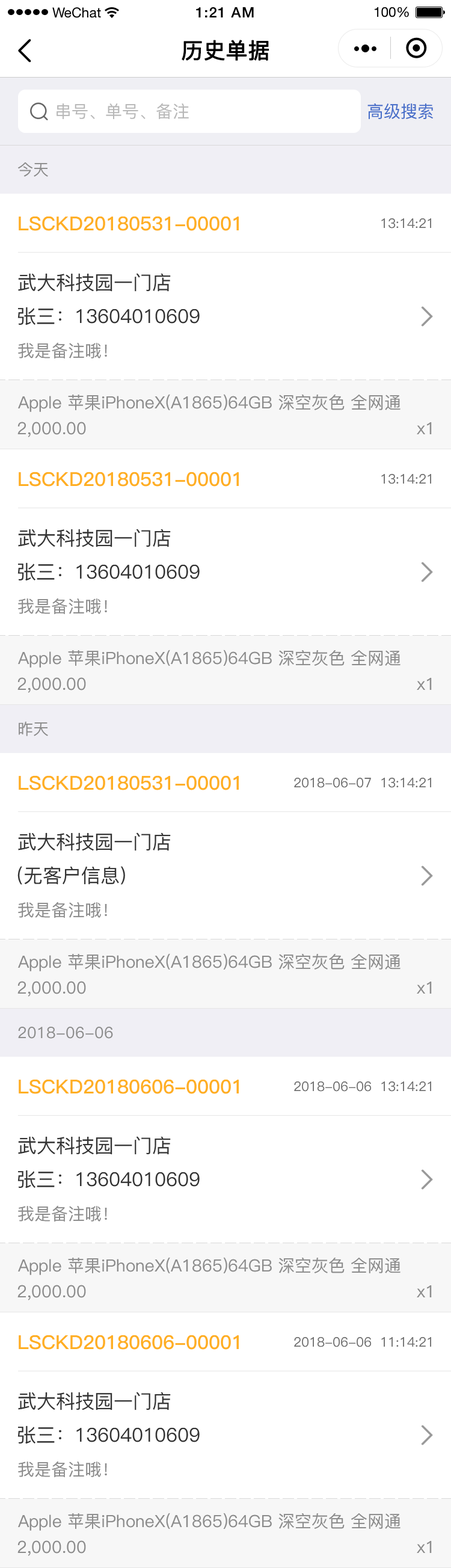
<style>
.page{position:relative;width:451px;height:1568px;background:#ffffff}
.page>*{position:absolute;margin:0}
.t1{font:21.7px "PingFang-SC-Medium";color:#000000;font-weight:bold}
.t2{font:16.8px "PingFang-SC-Medium";color:#b8b8b8}
.t3{font:16.8px "PingFang-SC-Medium";color:#476ec9}
.t4{font:15.6px "PingFang-SC-Medium";color:#8c8c8c}
.t5{font:19.2px "PingFang-SC-Bold";color:#ffaf23}
.t6{font:13.2px "PingFang-SC-Medium";color:#6e6e6e}
.t7{font:19.2px "PingFang-SC-Medium";color:#333333}
.t8{font:16.8px "PingFang-SC-Medium";color:#8c8c8c}
</style>
<div class="page">
<p class="t1" style="left:182px;top:40px;width:87px;height:21px">历史单据</p>
<p class="t2" style="left:57px;top:103px;width:132px;height:16px">串号、单号、备注</p>
<p class="t3" style="left:367px;top:103px;width:66px;height:16px">高级搜索</p>
<p class="t4" style="left:18px;top:162px;width:30px;height:15px">今天</p>
<p class="t5" style="left:19px;top:216px;width:220px;height:15px">LSCKD20180531-00001</p>
<p class="t6" style="left:381px;top:218px;width:50px;height:11px">13:14:21</p>
<p class="t7" style="left:18px;top:273px;width:153px;height:19px">武大科技园一门店</p>
<p class="t7" style="left:17px;top:307px;width:183px;height:18px">张三：13604010609</p>
<p class="t8" style="left:18px;top:342px;width:89px;height:16px">我是备注哦！</p>
<p class="t8" style="left:18px;top:394px;width:383px;height:18px">Apple 苹果iPhoneX(A1865)64GB 深空灰色 全网通</p>
<p class="t8" style="left:17px;top:422px;width:69px;height:15px">2,000.00</p>
<p class="t8" style="left:417px;top:422px;width:15px;height:12px">x1</p>
<p class="t5" style="left:19px;top:472px;width:220px;height:15px">LSCKD20180531-00001</p>
<p class="t6" style="left:381px;top:474px;width:50px;height:10px">13:14:21</p>
<p class="t7" style="left:18px;top:529px;width:153px;height:18px">武大科技园一门店</p>
<p class="t7" style="left:17px;top:562px;width:183px;height:19px">张三：13604010609</p>
<p class="t8" style="left:18px;top:598px;width:89px;height:16px">我是备注哦！</p>
<p class="t8" style="left:18px;top:650px;width:383px;height:18px">Apple 苹果iPhoneX(A1865)64GB 深空灰色 全网通</p>
<p class="t8" style="left:17px;top:677px;width:69px;height:16px">2,000.00</p>
<p class="t8" style="left:417px;top:678px;width:15px;height:12px">x1</p>
<p class="t4" style="left:19px;top:721px;width:29px;height:15px">昨天</p>
<p class="t5" style="left:19px;top:775px;width:220px;height:15px">LSCKD20180531-00001</p>
<p class="t6" style="left:294px;top:778px;width:137px;height:10px">2018-06-07  13:14:21</p>
<p class="t7" style="left:18px;top:832px;width:153px;height:19px">武大科技园一门店</p>
<p class="t7" style="left:17px;top:866px;width:108px;height:19px">(无客户信息)</p>
<p class="t8" style="left:18px;top:902px;width:89px;height:16px">我是备注哦！</p>
<p class="t8" style="left:18px;top:953px;width:383px;height:18px">Apple 苹果iPhoneX(A1865)64GB 深空灰色 全网通</p>
<p class="t8" style="left:17px;top:981px;width:69px;height:16px">2,000.00</p>
<p class="t8" style="left:417px;top:982px;width:15px;height:12px">x1</p>
<p class="t4" style="left:18px;top:1027px;width:95px;height:12px">2018-06-06</p>
<p class="t5" style="left:19px;top:1079px;width:220px;height:15px">LSCKD20180606-00001</p>
<p class="t6" style="left:294px;top:1081px;width:137px;height:11px">2018-06-06  13:14:21</p>
<p class="t7" style="left:18px;top:1136px;width:153px;height:19px">武大科技园一门店</p>
<p class="t7" style="left:17px;top:1170px;width:183px;height:18px">张三：13604010609</p>
<p class="t8" style="left:18px;top:1205px;width:89px;height:17px">我是备注哦！</p>
<p class="t8" style="left:18px;top:1257px;width:383px;height:18px">Apple 苹果iPhoneX(A1865)64GB 深空灰色 全网通</p>
<p class="t8" style="left:17px;top:1285px;width:69px;height:15px">2,000.00</p>
<p class="t8" style="left:417px;top:1285px;width:15px;height:12px">x1</p>
<p class="t5" style="left:19px;top:1335px;width:220px;height:15px">LSCKD20180606-00001</p>
<p class="t6" style="left:294px;top:1337px;width:137px;height:10px">2018-06-06  11:14:21</p>
<p class="t7" style="left:18px;top:1392px;width:153px;height:18px">武大科技园一门店</p>
<p class="t7" style="left:17px;top:1425px;width:183px;height:19px">张三：13604010609</p>
<p class="t8" style="left:18px;top:1461px;width:89px;height:16px">我是备注哦！</p>
<p class="t8" style="left:18px;top:1513px;width:383px;height:18px">Apple 苹果iPhoneX(A1865)64GB 深空灰色 全网通</p>
<p class="t8" style="left:17px;top:1540px;width:69px;height:16px">2,000.00</p>
<p class="t8" style="left:417px;top:1541px;width:15px;height:12px">x1</p>
</div>
